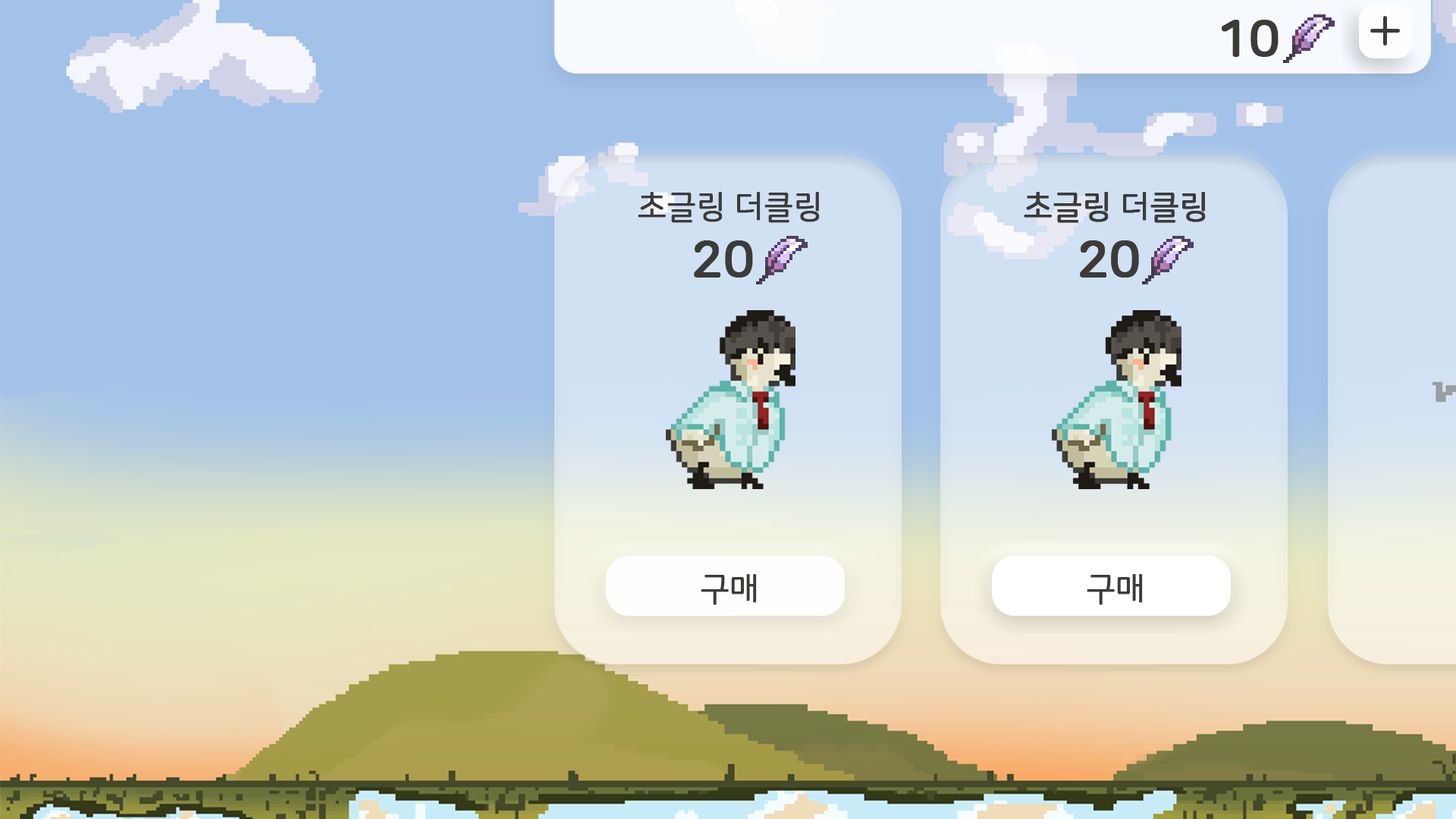
<style>
.page{position:relative;width:1456px;height:819px;background:#a3c2e9}
.page>*{position:absolute;margin:0}
.t1{font:50.6px "NanumSquareRoundB";color:#3c3b38;font-weight:bold}
.t2{font:31.6px "NanumSquareRoundR";color:#3c3b38;font-weight:bold}
</style>
<div class="page">
<p class="t1" style="left:1222px;top:20px;width:57px;height:37px">10</p>
<p class="t2" style="left:638px;top:192px;width:182px;height:31px">초글링 더클링</p>
<p class="t2" style="left:1024px;top:192px;width:182px;height:31px">초글링 더클링</p>
<p class="t2" style="left:1024px;top:192px;width:182px;height:31px">초글링 더클링</p>
<p class="t1" style="left:694px;top:240px;width:59px;height:38px">20</p>
<p class="t1" style="left:1080px;top:240px;width:59px;height:38px">20</p>
<p class="t1" style="left:1080px;top:240px;width:59px;height:38px">20</p>
<p class="t2" style="left:701px;top:574px;width:56px;height:31px">구매</p>
<p class="t2" style="left:1087px;top:574px;width:56px;height:31px">구매</p>
<p class="t2" style="left:1087px;top:574px;width:56px;height:31px">구매</p>
</div>
